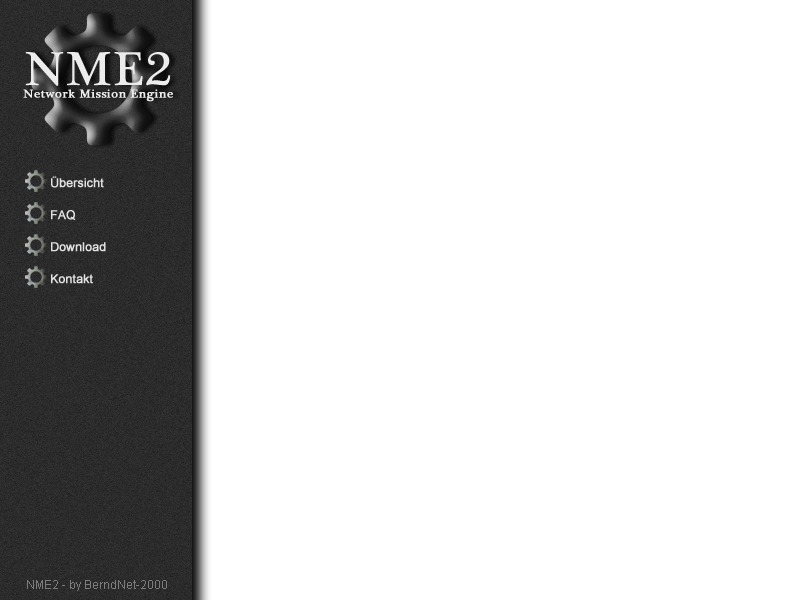
<style>
.page{position:relative;width:800px;height:600px;background:#ffffff}
.page>*{position:absolute;margin:0}
.t1{font:83.5px "PlantagenetCherokee";letter-spacing:0.025em;color:#ececec;scale:1.05 1}
.t2{font:20.6px "PlantagenetCherokee";letter-spacing:0.025em;color:#ececec;font-weight:bold;scale:1.05 1}
.t3{font:12px "ArialMT";color:#e1e1e1;font-weight:bold}
.t4{font:12px "ArialMT";color:#7c7c7c}
</style>
<div class="page">
<p class="t1" style="left:25px;top:52px;width:146px;height:34px">NME2</p>
<p class="t2" style="left:23px;top:89px;width:150px;height:13px">Network Mission Engine</p>
<p class="t3" style="left:51px;top:176px;width:53px;height:12px">Übersicht</p>
<p class="t3" style="left:51px;top:210px;width:25px;height:10px">FAQ</p>
<p class="t3" style="left:51px;top:242px;width:55px;height:10px">Download</p>
<p class="t3" style="left:51px;top:274px;width:42px;height:10px">Kontakt</p>
<p class="t4" style="left:27px;top:580px;width:140px;height:11px">NME2 - by BerndNet-2000</p>
</div>
